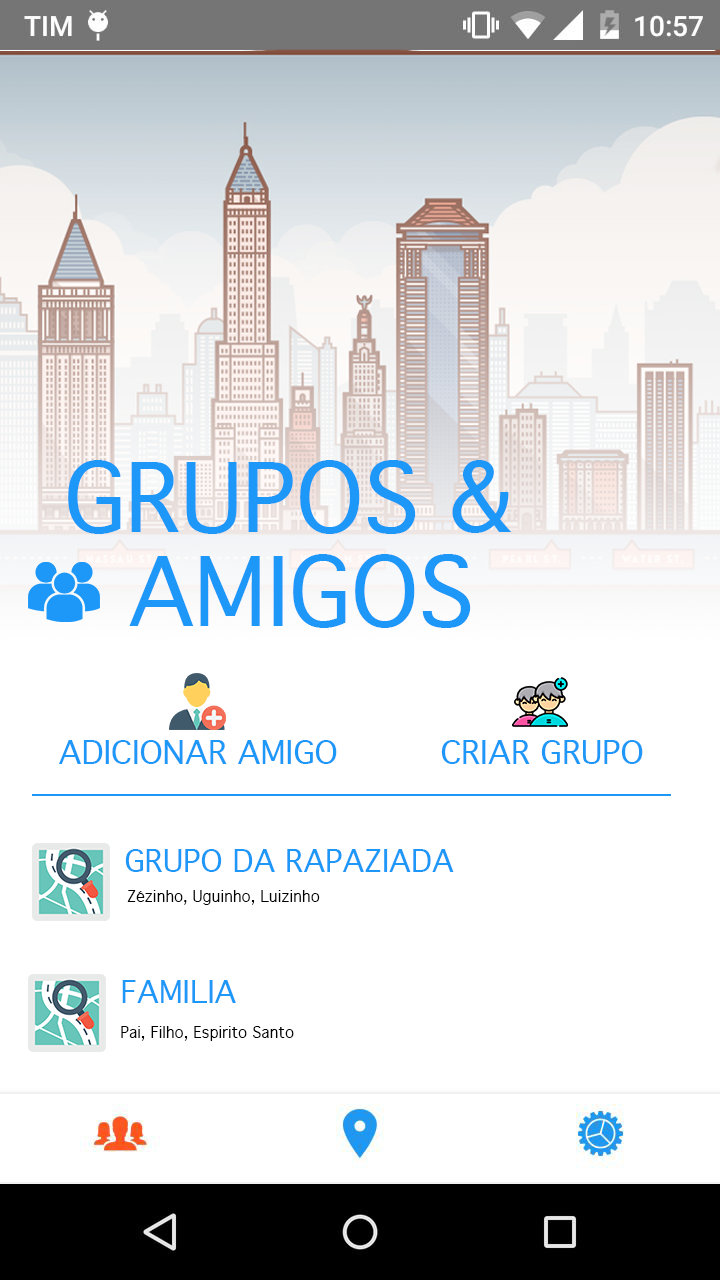
<style>
.page{position:relative;width:720px;height:1280px;background:#ffffff}
.page>*{position:absolute;margin:0}
.t1{font:91.8px "Geneva";color:#1d98f8}
.t2{font:31.6px "Geneva";color:#1d98f8}
.t3{font:30px "Geneva";color:#1d98f8}
.t4{font:15px "Geneva";color:#000000}
</style>
<div class="page">
<p class="t1" style="left:68px;top:460px;width:444px;height:74px">GRUPOS &amp;</p>
<p class="t1" style="left:129px;top:554px;width:342px;height:74px">AMIGOS</p>
<p class="t2" style="left:59px;top:740px;width:278px;height:24px">ADICIONAR AMIGO</p>
<p class="t2" style="left:441px;top:740px;width:202px;height:24px">CRIAR GRUPO</p>
<p class="t3" style="left:125px;top:849px;width:329px;height:23px">GRUPO DA RAPAZIADA</p>
<p class="t4" style="left:127px;top:890px;width:193px;height:15px">Zézinho, Uguinho, Luizinho</p>
<p class="t3" style="left:122px;top:980px;width:114px;height:23px">FAMILIA</p>
<p class="t4" style="left:121px;top:1026px;width:173px;height:15px">Pai, Filho, Espirito Santo</p>
</div>
